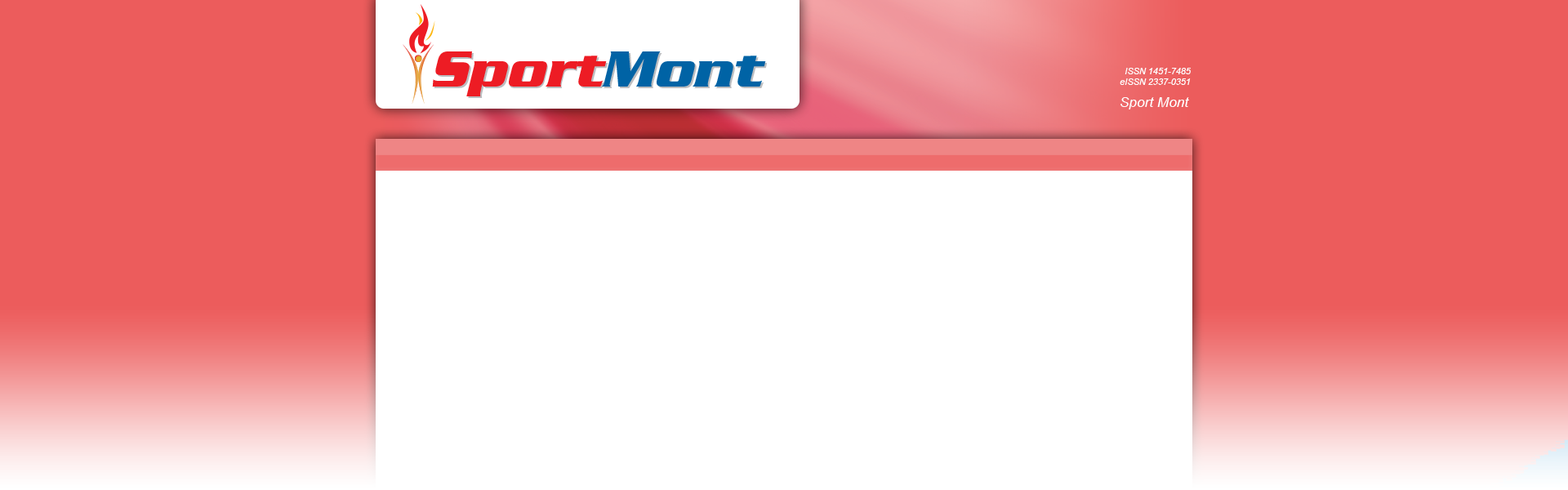
<style>
.page{position:relative;width:1568px;height:490px;background:#ffffff}
.page>*{position:absolute;margin:0}
.t1{font:8.8px/10.1px "Arial-ItalicMT";color:#ffffff}
.t2{font:14px "Arial-ItalicMT";color:#ffffff}
</style>
<div class="page">
<p class="t1" style="left:1120px;top:68px;width:71px;height:17px">ISSN 1451-7485<br>eISSN 2337-0351</p>
<p class="t2" style="left:1120px;top:97px;width:69px;height:12px">Sport Mont</p>
</div>
